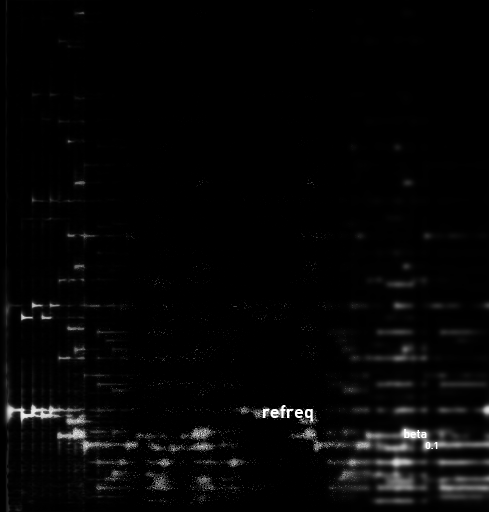
<style>
.page{position:relative;width:489px;height:512px;background:#000000}
.page>*{position:absolute;margin:0}
.t1{font:18px "DinHBoldBold";color:#ffffff}
.t2{font:12px "DinHMediumMedium";color:#ffffff}
.t3{font:10px "DinHBoldBold";color:#ffffff}
</style>
<div class="page">
<p class="t1" style="left:263px;top:405px;width:50px;height:16px">refreq</p>
<p class="t2" style="left:404px;top:429px;width:23px;height:9px">beta</p>
<p class="t3" style="left:425px;top:442px;width:13px;height:7px">0.1</p>
</div>
